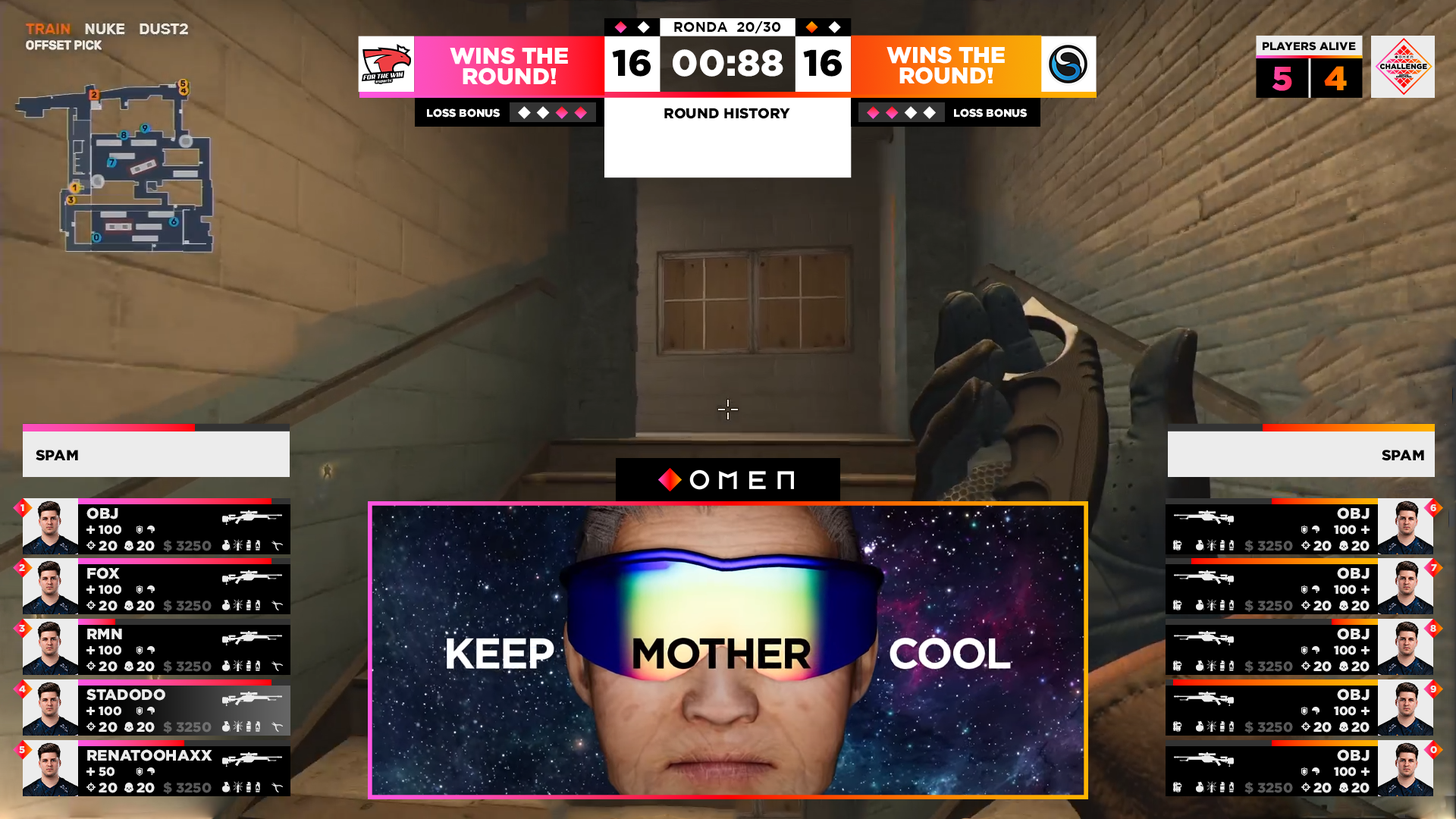
<style>
.page{position:relative;width:1456px;height:819px}
.page>*{position:absolute;margin:0}
.t1{font:13.9px "Gotham-Bold";color:#000000}
.t2{font:11.4px "Gotham-Black";color:#000000}
.t3{font:22.7px/20.3px "Gotham-Black";color:#ffffff}
.t4{font:36.8px "Gotham-Black";color:#000000}
.t5{font:36.8px "Gotham-Black";color:#ffffff}
.t6{font:33.7px "Gotham-Black";color:#ff7a00}
.t7{font:33.7px "Gotham-Black"}
.t8{font:10.9px "Gotham-Black";color:#ffffff}
.t9{font:14.4px "Gotham-Black";color:#000000}
.t10{font:14.7px "Gotham-Black";color:#000000}
.t11{font:9.6px "Gotham-Black";letter-spacing:0.05em;color:#ececec}
.t12{font:15.2px "Gotham-Black";color:#ececec}
.t13{font:12.1px "Gotham-Black";color:#ececec}
.t14{font:13.6px "Gotham-Black";color:#ececec}
.t15{font:13.6px "Gotham-Black";color:#585858}
.t16{font:13.6px "Gotham-Black";color:#6a6a6a}
</style>
<div class="page">
<p class="t1" style="left:674px;top:21px;width:107px;height:12px">RONDA  20/30</p>
<p class="t2" style="left:1263px;top:42px;width:93px;height:9px">PLAYERS ALIVE</p>
<p class="t3" style="left:450px;top:47px;width:118px;height:38px;text-align:center">WINS THE<br>ROUND!</p>
<p class="t4" style="left:612px;top:49px;width:39px;height:28px">16</p>
<p class="t5" style="left:673px;top:49px;width:110px;height:28px">00:88</p>
<p class="t4" style="left:803px;top:49px;width:39px;height:28px">16</p>
<p class="t3" style="left:886px;top:46px;width:119px;height:38px;text-align:center">WINS THE<br>ROUND!</p>
<p class="t6" style="left:1324px;top:66px;width:23px;height:24px">4</p>
<p class="t7" style="left:1272px;top:67px;width:20px;height:24px">5</p>
<p class="t8" style="left:427px;top:108px;width:73px;height:10px">LOSS BONUS</p>
<p class="t9" style="left:664px;top:108px;width:126px;height:11px">ROUND HISTORY</p>
<p class="t8" style="left:954px;top:108px;width:73px;height:10px">LOSS BONUS</p>
<p class="t10" style="left:36px;top:450px;width:42px;height:11px">SPAM</p>
<p class="t10" style="left:1382px;top:450px;width:42px;height:11px">SPAM</p>
<p class="t11" style="left:20px;top:504px;width:4px;height:7px">1</p>
<p class="t12" style="left:86px;top:507px;width:32px;height:12px">OBJ</p>
<p class="t12" style="left:1337px;top:507px;width:33px;height:12px">OBJ</p>
<p class="t11" style="left:1430px;top:504px;width:6px;height:8px">6</p>
<p class="t13" style="left:99px;top:525px;width:22px;height:10px">100</p>
<p class="t13" style="left:1334px;top:525px;width:22px;height:10px">100</p>
<p class="t14" style="left:99px;top:541px;width:19px;height:10px">20</p>
<p class="t14" style="left:136px;top:541px;width:19px;height:10px">20</p>
<p class="t15" style="left:163px;top:540px;width:49px;height:12px">$ 3250</p>
<p class="t15" style="left:1244px;top:540px;width:49px;height:12px">$ 3250</p>
<p class="t14" style="left:1313px;top:541px;width:19px;height:10px">20</p>
<p class="t14" style="left:1351px;top:541px;width:19px;height:10px">20</p>
<p class="t11" style="left:19px;top:564px;width:6px;height:7px">2</p>
<p class="t12" style="left:87px;top:567px;width:33px;height:12px">FOX</p>
<p class="t12" style="left:1337px;top:567px;width:33px;height:12px">OBJ</p>
<p class="t11" style="left:1431px;top:564px;width:6px;height:7px">7</p>
<p class="t13" style="left:99px;top:585px;width:22px;height:10px">100</p>
<p class="t13" style="left:1334px;top:585px;width:22px;height:10px">100</p>
<p class="t14" style="left:99px;top:601px;width:19px;height:10px">20</p>
<p class="t14" style="left:136px;top:601px;width:19px;height:10px">20</p>
<p class="t15" style="left:163px;top:600px;width:49px;height:12px">$ 3250</p>
<p class="t15" style="left:1244px;top:600px;width:49px;height:12px">$ 3250</p>
<p class="t14" style="left:1313px;top:601px;width:19px;height:10px">20</p>
<p class="t14" style="left:1351px;top:601px;width:19px;height:10px">20</p>
<p class="t11" style="left:19px;top:625px;width:6px;height:7px">3</p>
<p class="t12" style="left:87px;top:629px;width:35px;height:10px">RMN</p>
<p class="t12" style="left:1337px;top:628px;width:33px;height:12px">OBJ</p>
<p class="t11" style="left:1430px;top:625px;width:6px;height:7px">8</p>
<p class="t13" style="left:99px;top:645px;width:22px;height:10px">100</p>
<p class="t13" style="left:1334px;top:645px;width:22px;height:10px">100</p>
<p class="t14" style="left:99px;top:661px;width:19px;height:11px">20</p>
<p class="t14" style="left:136px;top:661px;width:19px;height:11px">20</p>
<p class="t15" style="left:163px;top:660px;width:49px;height:13px">$ 3250</p>
<p class="t15" style="left:1244px;top:660px;width:49px;height:13px">$ 3250</p>
<p class="t14" style="left:1313px;top:661px;width:19px;height:11px">20</p>
<p class="t14" style="left:1351px;top:661px;width:19px;height:11px">20</p>
<p class="t11" style="left:19px;top:686px;width:7px;height:6px">4</p>
<p class="t12" style="left:86px;top:689px;width:79px;height:12px">STADODO</p>
<p class="t12" style="left:1337px;top:689px;width:33px;height:12px">OBJ</p>
<p class="t11" style="left:1430px;top:686px;width:6px;height:7px">9</p>
<p class="t13" style="left:99px;top:706px;width:22px;height:10px">100</p>
<p class="t13" style="left:1334px;top:706px;width:22px;height:10px">100</p>
<p class="t14" style="left:99px;top:722px;width:19px;height:11px">20</p>
<p class="t14" style="left:136px;top:722px;width:19px;height:11px">20</p>
<p class="t16" style="left:163px;top:721px;width:49px;height:12px">$ 3250</p>
<p class="t15" style="left:1244px;top:721px;width:49px;height:12px">$ 3250</p>
<p class="t14" style="left:1313px;top:722px;width:19px;height:11px">20</p>
<p class="t14" style="left:1351px;top:722px;width:19px;height:11px">20</p>
<p class="t11" style="left:19px;top:746px;width:6px;height:8px">5</p>
<p class="t12" style="left:87px;top:749px;width:125px;height:12px">RENATOOHAXX</p>
<p class="t12" style="left:1337px;top:749px;width:33px;height:12px">OBJ</p>
<p class="t11" style="left:1430px;top:746px;width:7px;height:8px">0</p>
<p class="t13" style="left:99px;top:767px;width:16px;height:10px">50</p>
<p class="t13" style="left:1334px;top:767px;width:22px;height:10px">100</p>
<p class="t14" style="left:99px;top:783px;width:19px;height:10px">20</p>
<p class="t14" style="left:136px;top:783px;width:19px;height:10px">20</p>
<p class="t15" style="left:163px;top:782px;width:49px;height:12px">$ 3250</p>
<p class="t15" style="left:1244px;top:782px;width:49px;height:12px">$ 3250</p>
<p class="t14" style="left:1313px;top:783px;width:19px;height:10px">20</p>
<p class="t14" style="left:1351px;top:783px;width:19px;height:10px">20</p>
</div>
